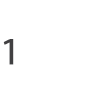
<style>
.page{position:relative;width:100px;height:100px;background:#ffffff}
.page>*{position:absolute;margin:0}
.t1{font:38.7px "MyriadPro-Regular";color:#414042;scale:1.11 1}
</style>
<div class="page">
<p class="t1" style="left:3px;top:39px;width:11px;height:26px">1</p>
</div>
